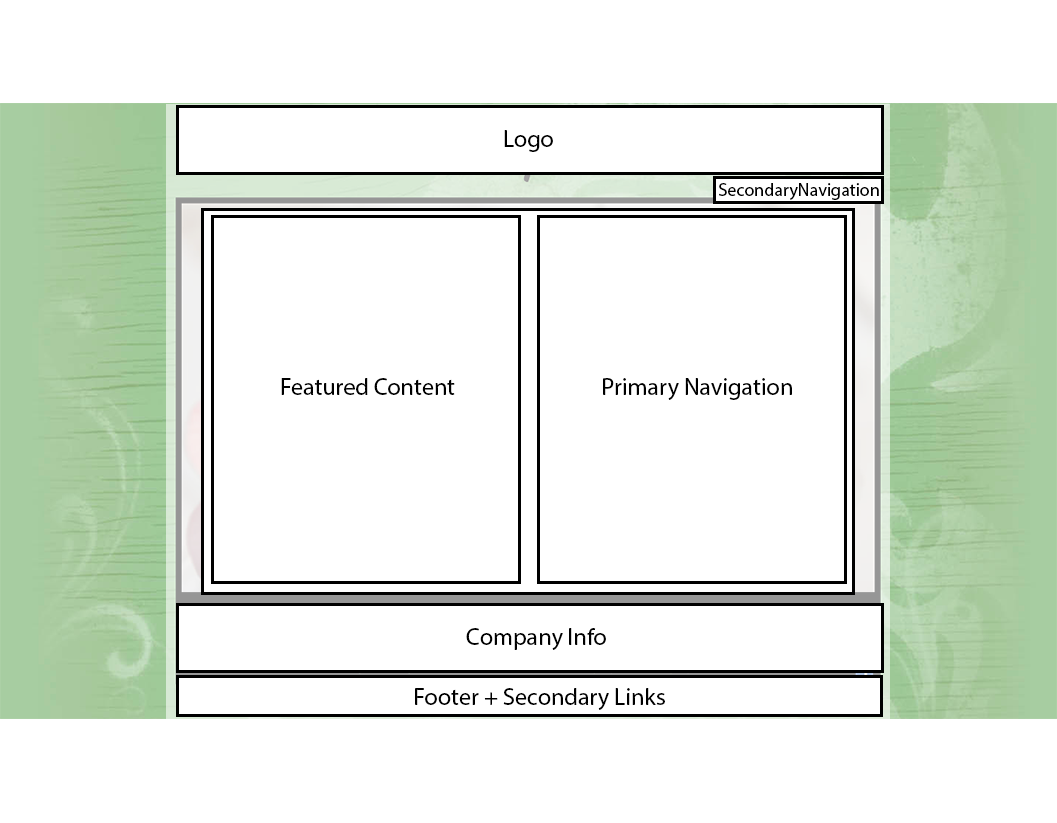
<style>
.page{position:relative;width:1057px;height:823px;background:#ffffff}
.page>*{position:absolute;margin:0}
.t1{font:24px "MyriadPro-Regular";color:#000000}
.t2{font:18px "MyriadPro-Regular";color:#000000}
</style>
<div class="page">
<p class="t1" style="left:504px;top:130px;width:49px;height:22px">Logo</p>
<p class="t2" style="left:719px;top:183px;width:160px;height:17px">SecondaryNavigation</p>
<p class="t1" style="left:281px;top:378px;width:174px;height:17px">Featured Content</p>
<p class="t1" style="left:603px;top:378px;width:189px;height:22px">Primary Navigation</p>
<p class="t1" style="left:466px;top:628px;width:140px;height:22px">Company Info</p>
<p class="t1" style="left:415px;top:688px;width:250px;height:22px">Footer + Secondary Links</p>
</div>
